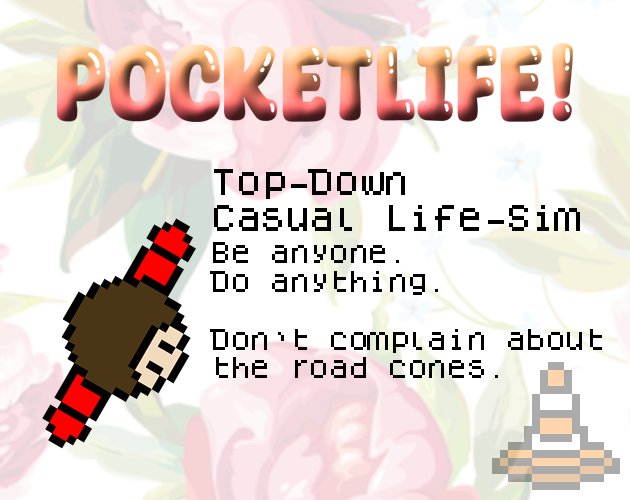
<style>
.page{position:relative;width:630px;height:500px;background:#ffffff}
.page>*{position:absolute;margin:0}
.t1{font:30px "Dogica_Pixel_Bold";letter-spacing:-0.18em;color:#000000;font-weight:bold}
.t2{font:24px "Dogica_Pixel_Bold";letter-spacing:-0.18em;color:#000000;font-weight:bold}
</style>
<div class="page">
<p class="t1" style="left:214px;top:169px;width:366px;height:62px">Top-Down<br>Casual Life-Sim</p>
<p class="t2" style="left:210px;top:242px;width:392px;height:136px">Be anyone.<br>Do anything.<br><br>Don’t complain about <br>the road cones.</p>
</div>
